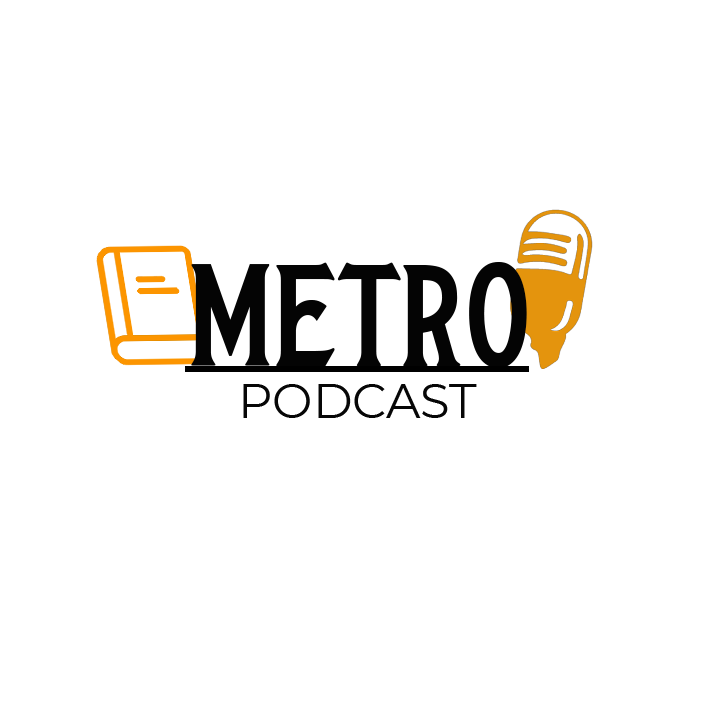
<style>
.page{position:relative;width:720px;height:720px;background:#ffffff}
.page>*{position:absolute;margin:0}
.t1{font:170.7px "TheWantersDEMO";color:#040404}
.t2{font:48px "Montserrat-Regular";color:#060606}
.t3{font:48px "Montserrat-Regular";color:#080808}
</style>
<div class="page">
<p class="t1" style="left:191px;top:262px;width:336px;height:106px">metro</p>
<p class="t2" style="left:243px;top:384px;width:234px;height:34px"><span class="t3">   <br></span>PODCAST</p>
</div>
